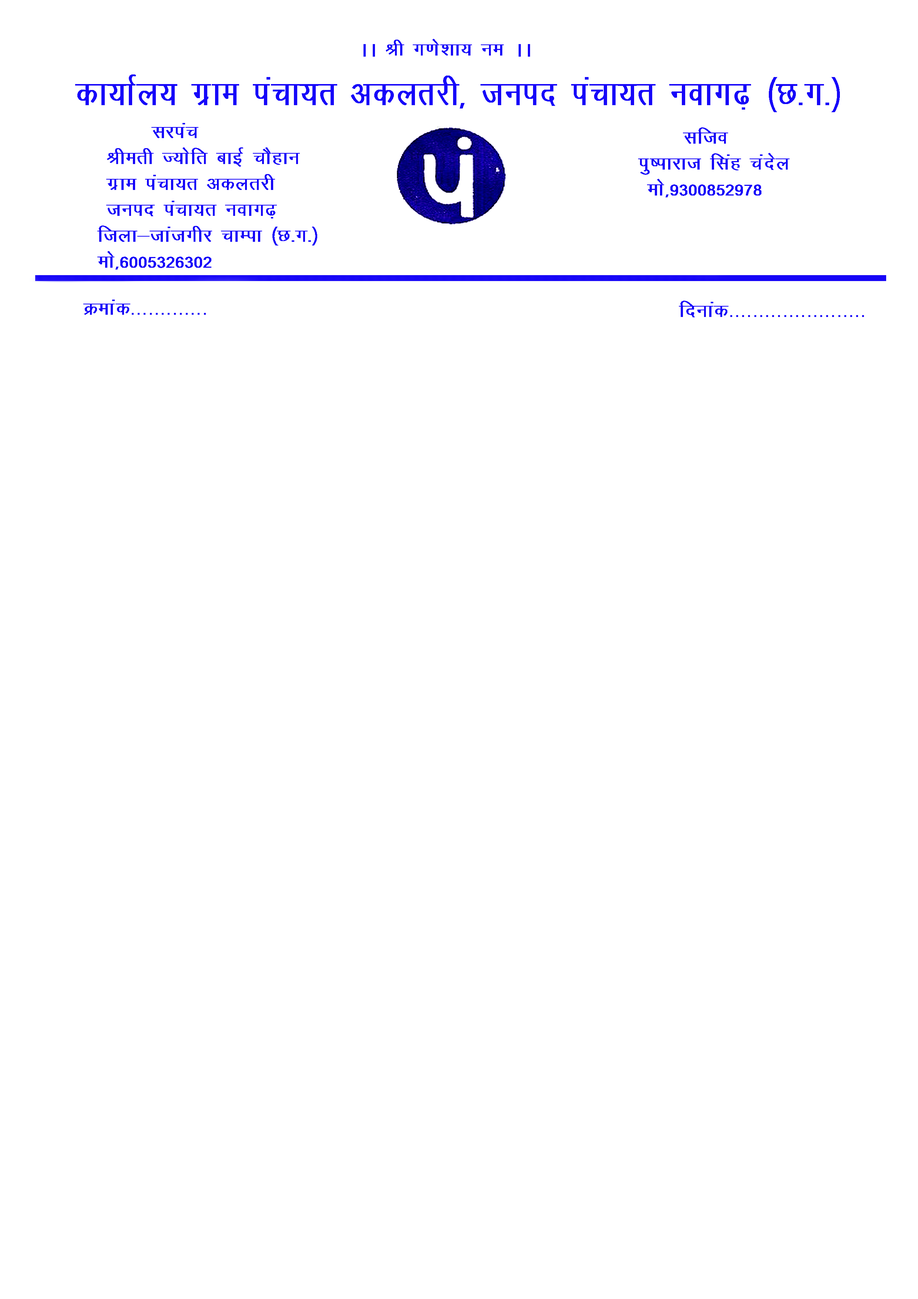
<style>
.page{position:relative;width:918px;height:1299px;background:#ffffff}
.page>*{position:absolute;margin:0}
.t1{font:21.6px "KrutiDev011";color:#1605f9}
.t2{font:40.5px "KrutiDev011";color:#1605f9;scale:0.85 1}
.t3{font:21.6px "ArialMT";color:#1605f9}
</style>
<div class="page">
<p class="t1" style="left:364px;top:39px;width:166px;height:18px">AA Jh x.ks'kk; ue AA</p>
<p class="t2" style="left:75px;top:74px;width:765px;height:38px">dk;kZy; xzke iapk;r vdyrjh] tuin iapk;r uokx&lt;+ ¼N-x-½</p>
<p class="t1" style="left:97px;top:123px;width:220px;height:147px">ljiap <br> Jherh T;ksfr ckbZ pkSgku<br> xzke iapk;r vdyrjh<br> tuin iapk;r uokx&lt;+<br>ftyk&amp;tkatxhj pkEik ¼N-x-½<br>eks]6005326302</p>
<p class="t1" style="left:638px;top:127px;width:152px;height:70px">lfto<br>iq”Ikkjkt flag pansy<br> eks]9300852978</p>
<p class="t3" style="left:83px;top:300px;width:123px;height:15px"><span class="t1">Øekad</span>.............</p>
<p class="t3" style="left:679px;top:301px;width:185px;height:16px"><span class="t1">fnukad</span>.......................</p>
</div>
